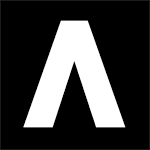
<style>
.page{position:relative;width:150px;height:150px;background:#000000}
.page>*{position:absolute;margin:0}
.t1{font:299.9px "Roboto-Bold";color:#ffffff;scale:0.86 1}
</style>
<div class="page">
<p class="t1" style="left:23px;top:20px;width:103px;height:108px">^</p>
</div>
